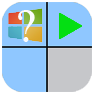
<style>
.page{position:relative;width:94px;height:94px;background:#8fc7ff}
.page>*{position:absolute;margin:0}
.t1{font:44px "OriyaMN";color:#fcfcfc}
</style>
<div class="page">
<p class="t1" style="left:18px;top:10px;width:17px;height:32px">?</p>
</div>
